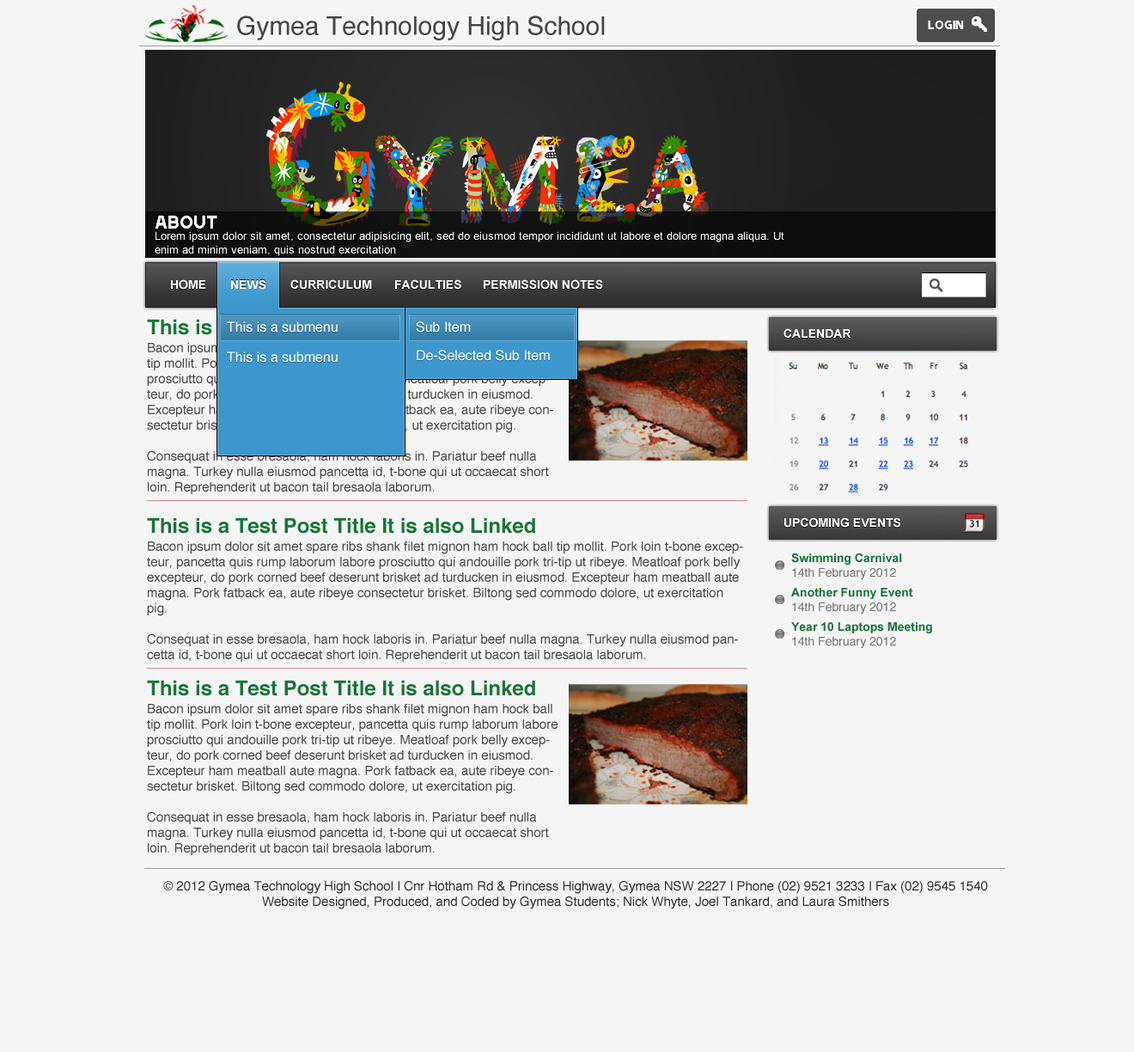
<style>
.page{position:relative;width:1134px;height:1052px;background:#f5f5f5}
.page>*{position:absolute;margin:0}
.t1{font:25.8px "Helvetica";color:#464646}
.t2{font:12px "Arial-BoldMT";color:#ffffff}
.t3{font:13.7px "Helvetica";color:#ffffff}
.t4{font:12.9px "Helvetica"}
.t5{font:20.6px "Helvetica-Bold";color:#197537}
.t6{font:12.9px "Helvetica";color:#454545}
.t7{font:12px "Arial-BoldMT";color:#197537}
.t8{font:12px "Helvetica";color:#6f6f6f}
.t9{font:12.9px "Helvetica";color:#2d2d2d}
</style>
<div class="page">
<p class="t1" style="left:237px;top:15px;width:368px;height:25px">Gymea Technology High School</p>
<p class="t2" style="left:171px;top:279px;width:35px;height:11px">HOME</p>
<p class="t2" style="left:231px;top:279px;width:35px;height:11px">NEWS</p>
<p class="t2" style="left:290px;top:279px;width:82px;height:11px">CURRICULUM</p>
<p class="t2" style="left:395px;top:279px;width:66px;height:11px">FACULTIES</p>
<p class="t2" style="left:484px;top:279px;width:119px;height:11px">PERMISSION NOTES</p>
<p class="t3" style="left:227px;top:321px;width:111px;height:11px">This is a submenu</p>
<p class="t3" style="left:416px;top:321px;width:55px;height:11px">Sub Item</p>
<p class="t2" style="left:783px;top:328px;width:68px;height:10px">CALENDAR</p>
<p class="t4" style="left:147px;top:343px;width:411px;height:151px">Bacon ipsum dolor sit amet spare ribs shank filet mignon ham hock ball tip mollit. Pork loin t-bone excepteur, pancetta quis rump laborum labore prosciutto qui andouille pork tri-tip ut ribeye. Meatloaf pork belly excepteur, do pork corned beef deserunt brisket ad turducken in eiusmod. Excepteur ham meatball aute magna. Pork fatback ea, aute ribeye consectetur brisket. Biltong sed commodo dolore, ut exercitation pig.<br><br>Consequat in esse bresaola, ham hock laboris in. Pariatur beef nulla magna. Turkey nulla eiusmod pancetta id, t-bone qui ut occaecat short loin. Reprehenderit ut bacon tail bresaola laborum.</p>
<p class="t3" style="left:227px;top:351px;width:111px;height:12px">This is a submenu</p>
<p class="t3" style="left:417px;top:350px;width:133px;height:11px">De-Selected Sub Item</p>
<p class="t5" style="left:147px;top:517px;width:388px;height:16px">This is a Test Post Title It is also Linked</p>
<p class="t2" style="left:784px;top:517px;width:116px;height:10px">UPCOMING EVENTS</p>
<p class="t6" style="left:147px;top:541px;width:596px;height:121px">Bacon ipsum dolor sit amet spare ribs shank filet mignon ham hock ball tip mollit. Pork loin t-bone excepteur, pancetta quis rump laborum labore prosciutto qui andouille pork tri-tip ut ribeye. Meatloaf pork belly excepteur, do pork corned beef deserunt brisket ad turducken in eiusmod. Excepteur ham meatball aute magna. Pork fatback ea, aute ribeye consectetur brisket. Biltong sed commodo dolore, ut exercitation pig.<br><br>Consequat in esse bresaola, ham hock laboris in. Pariatur beef nulla magna. Turkey nulla eiusmod pancetta id, t-bone qui ut occaecat short loin. Reprehenderit ut bacon tail bresaola laborum.</p>
<p class="t7" style="left:791px;top:552px;width:111px;height:12px">Swimming Carnival</p>
<p class="t8" style="left:792px;top:568px;width:104px;height:11px">14th February 2012</p>
<p class="t7" style="left:791px;top:588px;width:122px;height:11px">Another Funny Event</p>
<p class="t8" style="left:792px;top:602px;width:104px;height:11px">14th February 2012</p>
<p class="t7" style="left:791px;top:622px;width:141px;height:11px">Year 10 Laptops Meeting</p>
<p class="t8" style="left:792px;top:637px;width:104px;height:11px">14th February 2012</p>
<p class="t5" style="left:147px;top:680px;width:388px;height:16px">This is a Test Post Title It is also Linked</p>
<p class="t6" style="left:147px;top:704px;width:411px;height:151px">Bacon ipsum dolor sit amet spare ribs shank filet mignon ham hock ball tip mollit. Pork loin t-bone excepteur, pancetta quis rump laborum labore prosciutto qui andouille pork tri-tip ut ribeye. Meatloaf pork belly excepteur, do pork corned beef deserunt brisket ad turducken in eiusmod. Excepteur ham meatball aute magna. Pork fatback ea, aute ribeye consectetur brisket. Biltong sed commodo dolore, ut exercitation pig.<br><br>Consequat in esse bresaola, ham hock laboris in. Pariatur beef nulla magna. Turkey nulla eiusmod pancetta id, t-bone qui ut occaecat short loin. Reprehenderit ut bacon tail bresaola laborum.</p>
<p class="t9" style="left:163px;top:881px;width:825px;height:28px;text-align:center">© 2012 Gymea Technology High School | Cnr Hotham Rd &amp; Princess Highway, Gymea NSW 2227 | Phone (02) 9521 3233 | Fax (02) 9545 1540<br>Website Designed, Produced, and Coded by Gymea Students; Nick Whyte, Joel Tankard, and Laura Smithers</p>
</div>
